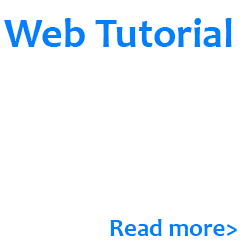
<style>
.page{position:relative;width:250px;height:250px;background:#ffffff}
.page>*{position:absolute;margin:0}
.t1{font:41.7px "Candara-Bold";color:#007fff}
.t2{font:25px "Candara-Bold";color:#007fff}
</style>
<div class="page">
<p class="t1" style="left:4px;top:18px;width:228px;height:29px">Web Tutorial</p>
<p class="t2" style="left:110px;top:219px;width:127px;height:17px">Read more&gt;</p>
</div>
